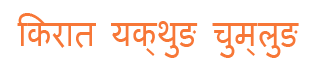
<style>
.page{position:relative;width:321px;height:79px;background:#ffffff}
.page>*{position:absolute;margin:0}
.t1{font:35.7px "Mangal-Regular";color:#f77737;scale:0.88 1}
</style>
<div class="page">
<p class="t1" style="left:17px;top:13px;width:282px;height:45px">िकरात यक्थुङ चुम्लुङ</p>
</div>
